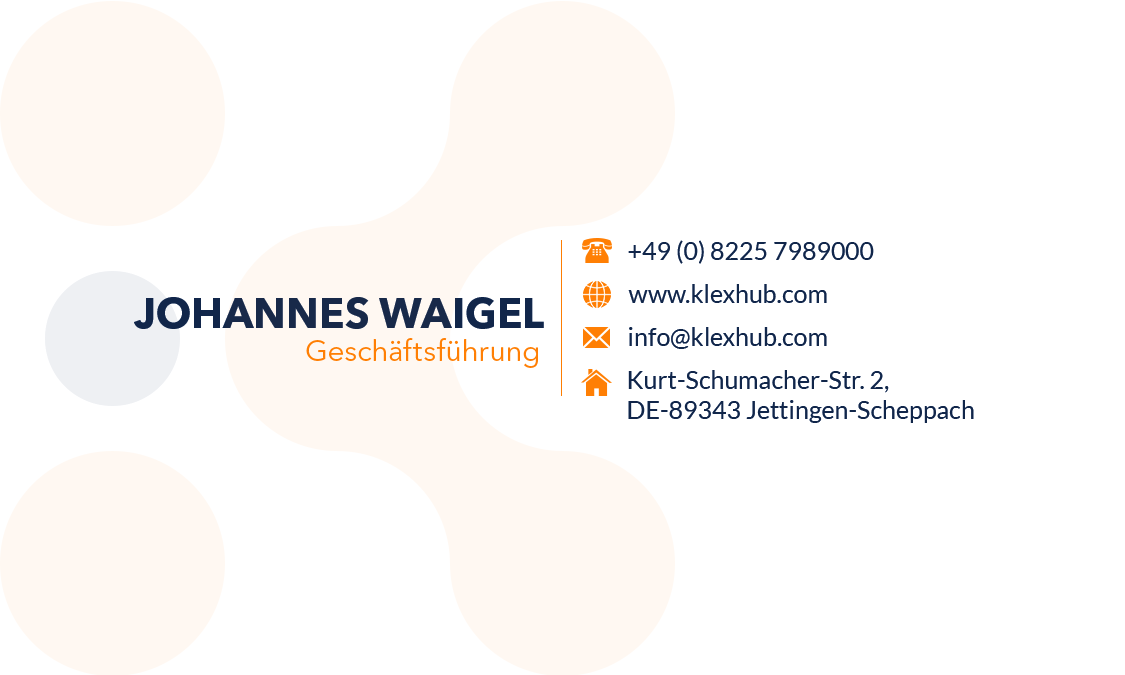
<style>
.page{position:relative;width:1125px;height:675px;background:#ffffff}
.page>*{position:absolute;margin:0}
.t1{font:25px "Lato-Regular";color:#11264a}
.t2{font:41.7px "AvenirNextLTPro-Bold";color:#11264a;text-transform:uppercase}
.t3{font:29.2px "AvenirNextLTPro-Regular";color:#ff7f04}
</style>
<div class="page">
<p class="t1" style="left:628px;top:240px;width:246px;height:24px">+49 (0) 8225 7989000</p>
<p class="t1" style="left:628px;top:284px;width:199px;height:19px">www.klexhub.com</p>
<p class="t2" style="left:134px;top:297px;width:410px;height:32px">Johannes Waigel</p>
<p class="t1" style="left:629px;top:327px;width:198px;height:22px">info@klexhub.com</p>
<p class="t3" style="left:306px;top:338px;width:232px;height:30px">Geschäftsführung</p>
<p class="t1" style="left:628px;top:370px;width:346px;height:53px">Kurt-Schumacher-Str. 2,<br>DE-89343 Jettingen-Scheppach</p>
</div>
